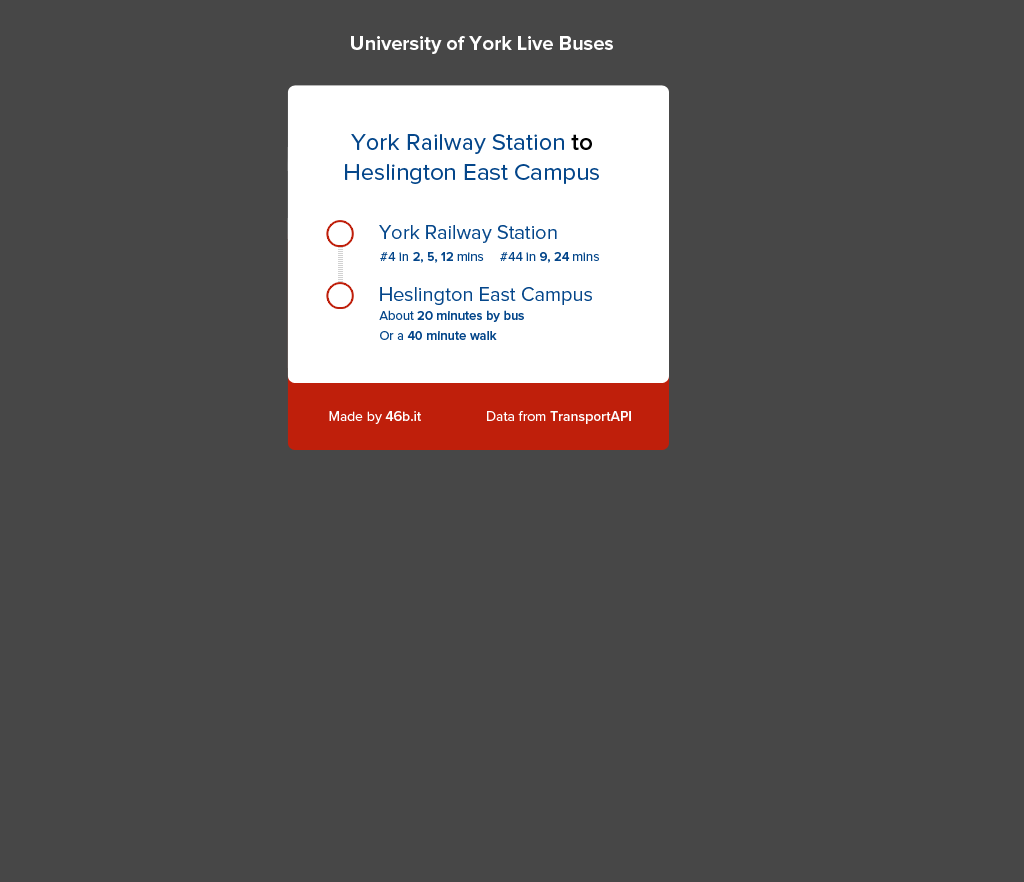
<style>
.page{position:relative;width:1024px;height:882px;background:#474747}
.page>*{position:absolute;margin:0}
.t1{font:20px "ProximaNova-Bold";color:#ffffff}
.t2{font:24px/30px "ProximaNova-Regular";color:#04468a}
.t3{font:24px/30px "ProximaNova-Semibold";color:#000000}
.t4{font:20px "ProximaNova-Regular";color:#04468a}
.t5{font:13px "ProximaNova-Regular";color:#04468a}
.t6{font:13px "ProximaNova-Semibold";color:#04468a}
.t7{font:13px/20px "ProximaNova-Semibold";color:#04468a}
.t8{font:13px/20px "ProximaNova-Regular";color:#04468a}
.t9{font:14px "ProximaNova-Regular";color:#ffffff}
.t10{font:14px "ProximaNova-Semibold";color:#ffffff}
</style>
<div class="page">
<p class="t1" style="left:351px;top:36px;width:262px;height:18px">University of York Live Buses</p>
<p class="t2" style="left:345px;top:134px;width:254px;height:50px;text-align:center">York Railway Station<span class="t3"> to<br></span>Heslington East Campus</p>
<p class="t4" style="left:379px;top:225px;width:178px;height:18px">York Railway Station</p>
<p class="t5" style="left:380px;top:252px;width:219px;height:11px">#4 in <span class="t6">2, 5, 12 </span>mins     #44 in <span class="t6">9, 24 </span>mins</p>
<p class="t4" style="left:380px;top:287px;width:212px;height:18px">Heslington East Campus</p>
<p class="t7" style="left:379px;top:310px;width:145px;height:30px"><span class="t8">About </span>20 minutes by bus<br><span class="t8">Or a </span>40 minute walk</p>
<p class="t9" style="left:329px;top:411px;width:92px;height:13px">Made by <span class="t10">46b.it</span></p>
<p class="t10" style="left:487px;top:411px;width:144px;height:13px"><span class="t9">Data from </span>TransportAPI</p>
</div>
